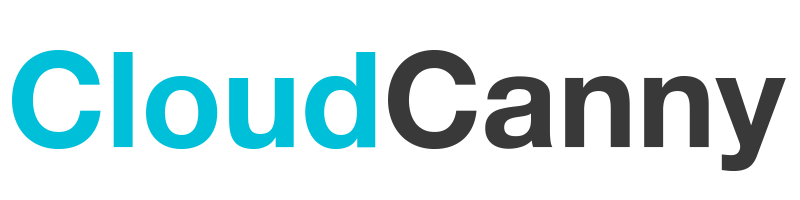
<style>
.page{position:relative;width:800px;height:200px;background:#ffffff}
.page>*{position:absolute;margin:0}
.t1{font:133.3px "HelveticaNeue-Bold";color:#00bfd8}
.t2{font:133.3px "HelveticaNeue-Bold";color:#393939}
</style>
<div class="page">
<p class="t1" style="left:12px;top:50px;width:774px;height:121px">Cloud<span class="t2">Canny</span></p>
</div>
